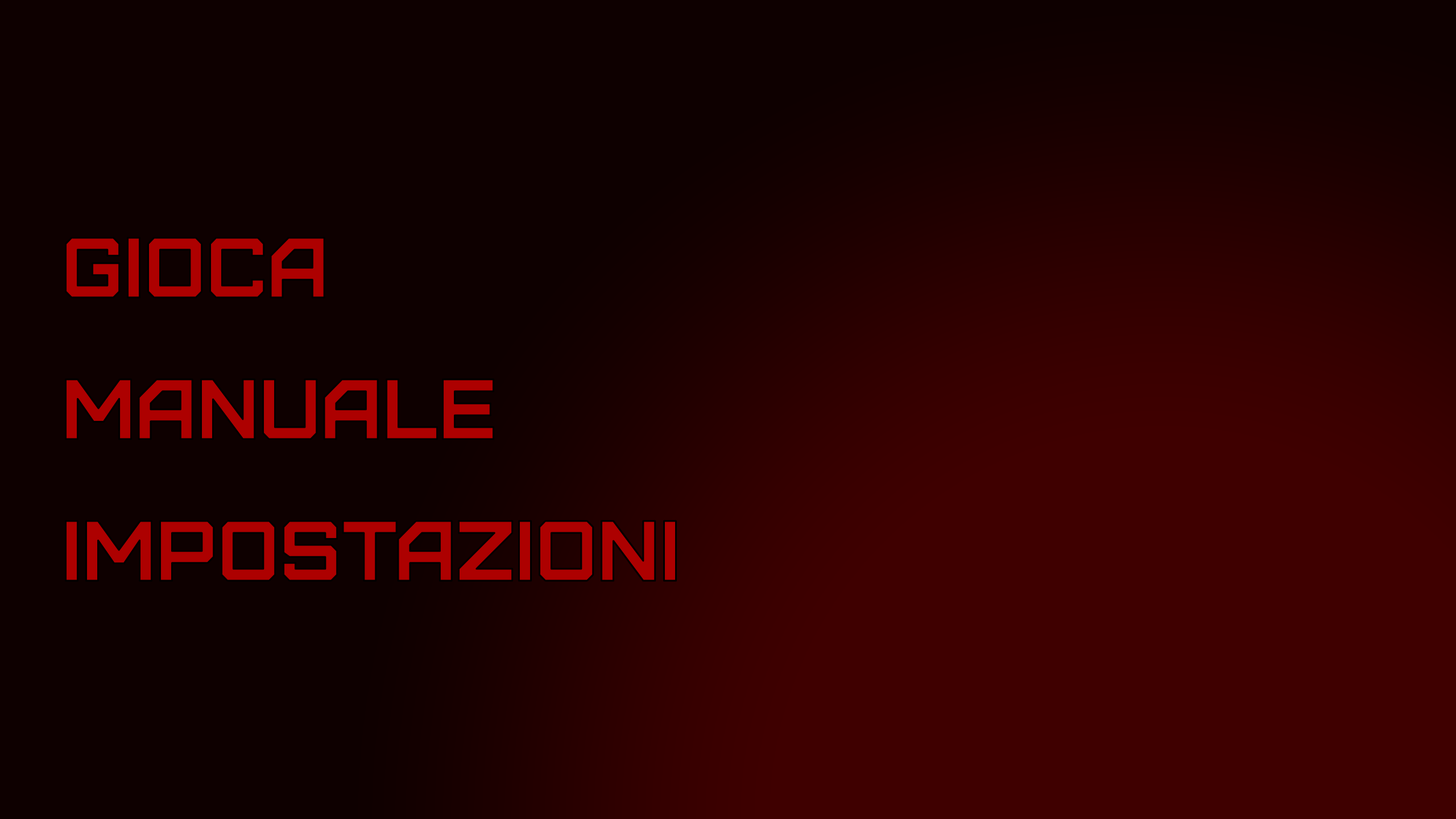
<style>
.page{position:relative;width:1456px;height:819px;background:#0e0000}
.page>*{position:absolute;margin:0}
.t1{font:85.3px "Furore";color:#ad0000}
</style>
<div class="page">
<p class="t1" style="left:64px;top:237px;width:262px;height:62px">GIOCA</p>
<p class="t1" style="left:64px;top:378px;width:431px;height:62px">MANUALE</p>
<p class="t1" style="left:64px;top:520px;width:613px;height:62px">IMPOSTAZIONI</p>
</div>
